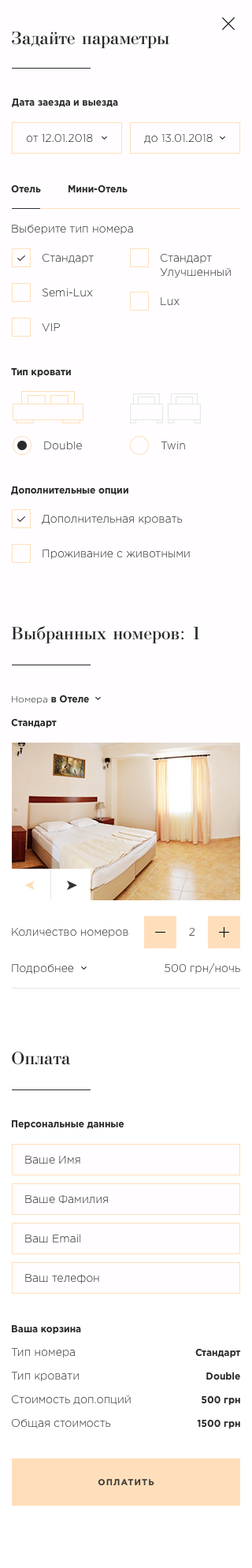
<style>
.page{position:relative;width:252px;height:1568px;background:#fffdff}
.page>*{position:absolute;margin:0}
.t1{font:18.9px "BodoniCyrillic";color:#2a2a2a}
.t2{font:9.5px "GothamPro-Bold";color:#2a2a2a}
.t3{font:11px "GothamPro-Light";color:#2a2a2a}
.t4{font:11px "GothamPro-Light"}
.t5{font:11px/14.2px "GothamPro-Light"}
.t6{font:9.5px "GothamPro-Light";color:#2a2a2a}
.t7{font:8.7px "GothamPro-Bold";letter-spacing:0.1em;color:#373737;text-transform:uppercase}
</style>
<div class="page">
<p class="t1" style="left:12px;top:32px;width:157px;height:17px">Задайте параметры</p>
<p class="t2" style="left:12px;top:99px;width:106px;height:8px">Дата заезда и выезда</p>
<p class="t3" style="left:26px;top:134px;width:67px;height:9px">от 12.01.2018</p>
<p class="t3" style="left:144px;top:134px;width:69px;height:9px">до 13.01.2018</p>
<p class="t2" style="left:11px;top:184px;width:30px;height:9px">Отель</p>
<p class="t2" style="left:69px;top:184px;width:59px;height:9px">Мини-Отель</p>
<p class="t3" style="left:12px;top:225px;width:121px;height:10px">Выберите тип номера</p>
<p class="t4" style="left:43px;top:254px;width:51px;height:10px">Стандарт</p>
<p class="t5" style="left:160px;top:254px;width:71px;height:24px">Стандарт<br>Улучшенный</p>
<p class="t4" style="left:43px;top:289px;width:50px;height:8px">Semi-Lux</p>
<p class="t4" style="left:161px;top:297px;width:19px;height:9px">Lux</p>
<p class="t4" style="left:42px;top:323px;width:18px;height:9px">VIP</p>
<p class="t2" style="left:11px;top:368px;width:60px;height:9px">Тип кровати</p>
<p class="t4" style="left:44px;top:441px;width:38px;height:9px">Double</p>
<p class="t4" style="left:161px;top:441px;width:24px;height:8px">Twin</p>
<p class="t2" style="left:11px;top:486px;width:117px;height:9px">Дополнительные опции</p>
<p class="t4" style="left:42px;top:515px;width:141px;height:10px">Дополнительная кровать</p>
<p class="t4" style="left:43px;top:549px;width:147px;height:11px">Проживание с животными</p>
<p class="t1" style="left:12px;top:625px;width:187px;height:19px">Выбранных номеров: 1</p>
<p class="t2" style="left:12px;top:695px;width:77px;height:9px"><span class="t6">Номера</span> в Отеле</p>
<p class="t2" style="left:11px;top:719px;width:46px;height:9px">Стандарт</p>
<p class="t4" style="left:12px;top:928px;width:116px;height:10px">Количество номеров</p>
<p class="t4" style="left:189px;top:928px;width:6px;height:8px">2</p>
<p class="t4" style="left:12px;top:964px;width:62px;height:10px">Подробнее</p>
<p class="t4" style="left:165px;top:963px;width:75px;height:11px">500 грн/ночь</p>
<p class="t1" style="left:12px;top:1052px;width:59px;height:13px">Оплата</p>
<p class="t2" style="left:12px;top:1120px;width:113px;height:9px">Персональные данные</p>
<p class="t3" style="left:25px;top:1156px;width:55px;height:8px">Ваше Имя</p>
<p class="t3" style="left:25px;top:1194px;width:83px;height:10px">Ваше Фамилия</p>
<p class="t3" style="left:25px;top:1234px;width:56px;height:9px">Ваш Email</p>
<p class="t3" style="left:25px;top:1274px;width:74px;height:10px">Ваш телефон</p>
<p class="t2" style="left:12px;top:1325px;width:69px;height:9px">Ваша корзина</p>
<p class="t4" style="left:11px;top:1348px;width:64px;height:10px">Тип номера</p>
<p class="t2" style="left:196px;top:1349px;width:45px;height:9px">Стандарт</p>
<p class="t4" style="left:11px;top:1372px;width:68px;height:10px">Тип кровати</p>
<p class="t2" style="left:207px;top:1372px;width:33px;height:8px">Double</p>
<p class="t3" style="left:12px;top:1395px;width:119px;height:10px">Стоимость доп.опций</p>
<p class="t2" style="left:202px;top:1395px;width:38px;height:10px">500 грн</p>
<p class="t4" style="left:12px;top:1419px;width:99px;height:9px">Общая стоимость</p>
<p class="t2" style="left:197px;top:1419px;width:43px;height:9px">1500 грн</p>
<p class="t7" style="left:98px;top:1479px;width:57px;height:7px">Оплатить</p>
</div>
